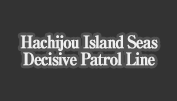
<style>
.page{position:relative;width:177px;height:101px;background:#333333}
.page>*{position:absolute;margin:0}
.t1{font:17px/17px "RyuminPro-ExBold";letter-spacing:-0.08em;color:#eeeeee;font-weight:bold;scale:0.9 1}
</style>
<div class="page">
<p class="t1" style="left:20px;top:35px;width:138px;height:31px;text-align:center">Hachijou Island Seas<br>Decisive Patrol Line</p>
</div>
